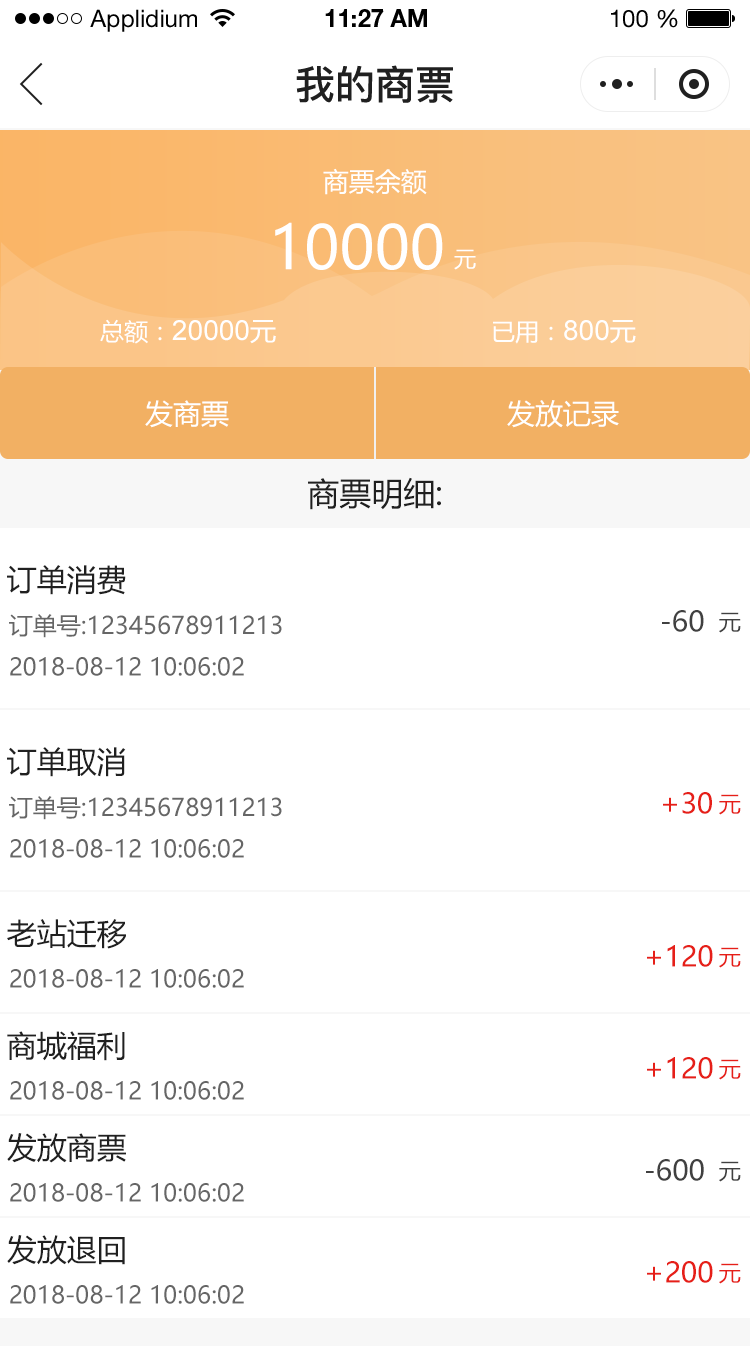
<style>
.page{position:relative;width:750px;height:1346px;background:#ffffff}
.page>*{position:absolute;margin:0}
.t1{font:24px "HelveticaNeueLTStd-Roman";color:#000000}
.t2{font:24px "HelveticaNeueLTStd-Bd";color:#000000}
.t3{font:40px "PingFang-SC-Bold";color:#202020;text-transform:uppercase}
.t4{font:26px "MicrosoftYaHei";color:#ffffff;text-transform:uppercase}
.t5{font:60px "MicrosoftYaHei";color:#ffffff;text-transform:uppercase}
.t6{font:22px "MicrosoftYaHei";color:#ffffff;text-transform:uppercase}
.t7{font:28px "ArialMT";color:#ffffff;text-transform:uppercase}
.t8{font:24px "MicrosoftYaHei";color:#ffffff;text-transform:uppercase}
.t9{font:28px "MicrosoftYaHei";color:#ffffff;text-transform:uppercase}
.t10{font:32px "MicrosoftYaHei";color:#202020;text-transform:uppercase}
.t11{font:30px "MicrosoftYaHei";color:#202020;text-transform:uppercase}
.t12{font:24px "MicrosoftYaHei";color:#666666;text-transform:uppercase}
.t13{font:28px "MicrosoftYaHei";color:#404040;text-transform:uppercase}
.t14{font:22px "MicrosoftYaHei";color:#404040;text-transform:uppercase}
.t15{font:28px "MicrosoftYaHei";color:#e61f18;text-transform:uppercase}
.t16{font:22px "MicrosoftYaHei";color:#e61f18;text-transform:uppercase}
</style>
<div class="page">
<p class="t1" style="left:90px;top:9px;width:107px;height:23px">Applidium</p>
<p class="t2" style="left:325px;top:9px;width:102px;height:18px">11:27 AM</p>
<p class="t1" style="left:611px;top:9px;width:67px;height:19px">100 %</p>
<p class="t3" style="left:296px;top:65px;width:157px;height:38px">我的商票</p>
<p class="t4" style="left:323px;top:168px;width:104px;height:27px">商票余额</p>
<p class="t5" style="left:275px;top:222px;width:168px;height:48px">10000</p>
<p class="t6" style="left:454px;top:249px;width:22px;height:21px">元</p>
<p class="t7" style="left:100px;top:319px;width:176px;height:25px"><span class="t8">总额：</span>20000<span class="t4">元</span></p>
<p class="t8" style="left:493px;top:320px;width:143px;height:24px">已用：<span class="t7">800</span><span class="t4">元</span></p>
<p class="t9" style="left:145px;top:400px;width:84px;height:28px">发商票</p>
<p class="t9" style="left:507px;top:400px;width:112px;height:28px">发放记录</p>
<p class="t10" style="left:308px;top:477px;width:133px;height:33px">商票明细:</p>
<p class="t11" style="left:7px;top:565px;width:119px;height:30px">订单消费</p>
<p class="t12" style="left:9px;top:614px;width:273px;height:24px">订单号:12345678911213</p>
<p class="t13" style="left:662px;top:610px;width:42px;height:22px">-60</p>
<p class="t14" style="left:719px;top:612px;width:22px;height:21px">元</p>
<p class="t12" style="left:10px;top:657px;width:234px;height:19px">2018-08-12 10:06:02</p>
<p class="t11" style="left:7px;top:747px;width:119px;height:30px">订单取消</p>
<p class="t12" style="left:9px;top:796px;width:273px;height:24px">订单号:12345678911213</p>
<p class="t15" style="left:663px;top:792px;width:49px;height:22px">+30</p>
<p class="t16" style="left:719px;top:794px;width:22px;height:21px">元</p>
<p class="t12" style="left:10px;top:839px;width:234px;height:19px">2018-08-12 10:06:02</p>
<p class="t11" style="left:7px;top:919px;width:119px;height:30px">老站迁移</p>
<p class="t15" style="left:647px;top:945px;width:66px;height:22px">+120</p>
<p class="t16" style="left:719px;top:947px;width:22px;height:21px">元</p>
<p class="t12" style="left:10px;top:969px;width:234px;height:19px">2018-08-12 10:06:02</p>
<p class="t11" style="left:7px;top:1031px;width:118px;height:30px">商城福利</p>
<p class="t15" style="left:647px;top:1057px;width:66px;height:22px">+120</p>
<p class="t16" style="left:719px;top:1059px;width:22px;height:21px">元</p>
<p class="t12" style="left:10px;top:1081px;width:234px;height:19px">2018-08-12 10:06:02</p>
<p class="t11" style="left:7px;top:1133px;width:119px;height:30px">发放商票</p>
<p class="t13" style="left:646px;top:1159px;width:58px;height:22px">-600</p>
<p class="t14" style="left:719px;top:1161px;width:22px;height:21px">元</p>
<p class="t12" style="left:10px;top:1183px;width:234px;height:19px">2018-08-12 10:06:02</p>
<p class="t11" style="left:7px;top:1235px;width:118px;height:30px">发放退回</p>
<p class="t15" style="left:647px;top:1261px;width:66px;height:22px">+200</p>
<p class="t16" style="left:719px;top:1263px;width:22px;height:21px">元</p>
<p class="t12" style="left:10px;top:1285px;width:234px;height:19px">2018-08-12 10:06:02</p>
</div>
